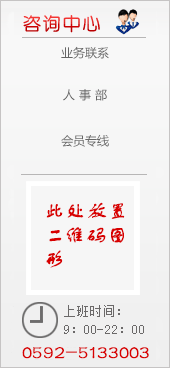
<style>
.page{position:relative;width:170px;height:368px;background:#f6f6f6}
.page>*{position:absolute;margin:0}
.t1{font:12px "MicrosoftYaHei";color:#666666}
.t2{font:20px/24px "FZSTK--GBK1-0";color:#d80000;font-weight:bold}
.t3{font:20px "FZSTK--GBK1-0";color:#d80000;font-weight:bold}
</style>
<div class="page">
<p class="t1" style="left:61px;top:46px;width:48px;height:13px">业务联系</p>
<p class="t1" style="left:63px;top:89px;width:44px;height:12px">人 事 部</p>
<p class="t1" style="left:61px;top:134px;width:48px;height:13px">会员专线</p>
<p class="t2" style="left:46px;top:202px;width:79px;height:66px">此处放置<br>二维码图<br>形</p>
<p class="t3" style="left:22px;top:347px;width:127px;height:12px">0592-5133003</p>
</div>
